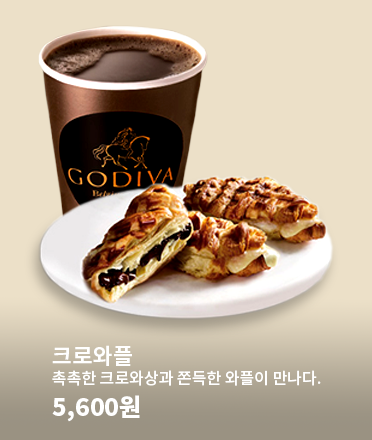
<style>
.page{position:relative;width:372px;height:440px;background:#ece0c8}
.page>*{position:absolute;margin:0}
.t1{font:16px/25px "NotoSansCJKkr-Medium";color:#ffffff}
.t2{font:22px/25px "NotoSansCJKkr-Bold";color:#ffffff}
.t3{font:16px/25px "NotoSansCJKkr-Medium";color:#ffffff;scale:0.95 1}
.t4{font:24px/20px "NotoSansCJKkr-Black";color:#ffffff}
</style>
<div class="page">
<p class="t1" style="left:52px;top:345px;width:269px;height:77px"><span class="t2">크로와플<br></span>촉촉한 크로와상과 쫀득한 와플이 만나다<span class="t3">.<br></span><span class="t4">5,600원</span></p>
</div>
